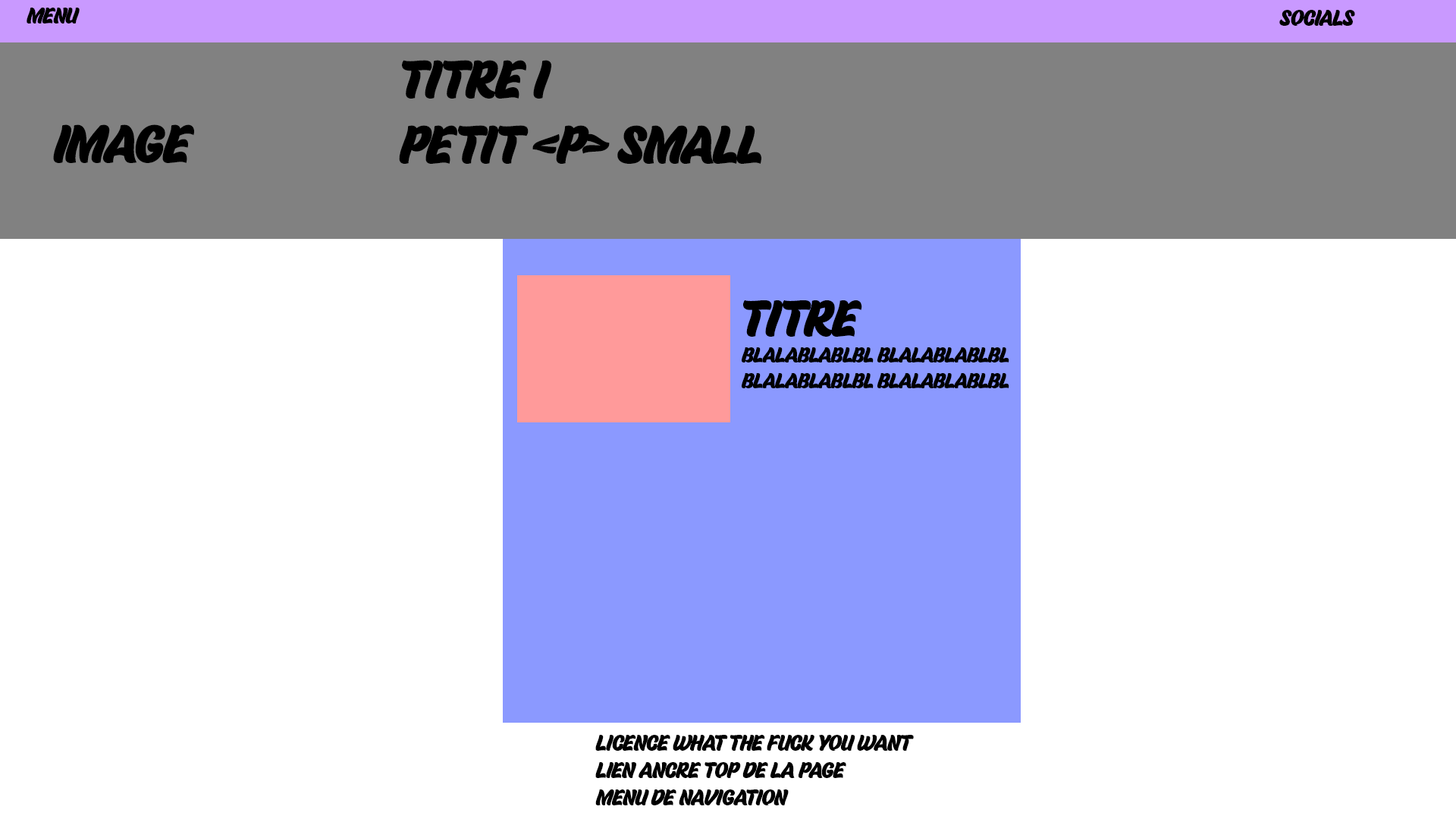
<style>
.page{position:relative;width:1456px;height:819px;background:#ffffff}
.page>*{position:absolute;margin:0}
.t1{font:22.7px "Brothery";letter-spacing:-0.03em;color:#000000}
.t2{font:54.6px "Brothery";letter-spacing:-0.03em;color:#000000}
.t3{font:21.7px "Brothery";letter-spacing:-0.03em;color:#000000}
.t4{font:52.1px "Brothery";letter-spacing:-0.03em;color:#000000}
</style>
<div class="page">
<p class="t1" style="left:27px;top:8px;width:53px;height:16px">menu</p>
<p class="t1" style="left:1279px;top:10px;width:76px;height:16px">socials</p>
<p class="t2" style="left:399px;top:60px;width:362px;height:104px">titre i<br>petit &lt;p&gt; small</p>
<p class="t2" style="left:53px;top:124px;width:141px;height:39px">image</p>
<p class="t3" style="left:742px;top:300px;width:267px;height:88px"><span class="t4">titre<br></span>blalablablbl blalablablbl <br>blalablablbl blalablablbl</p>
<p class="t1" style="left:595px;top:735px;width:319px;height:70px">licence what the fuck you want<br>lien ancre top de la page<br>menu de navigation</p>
</div>
